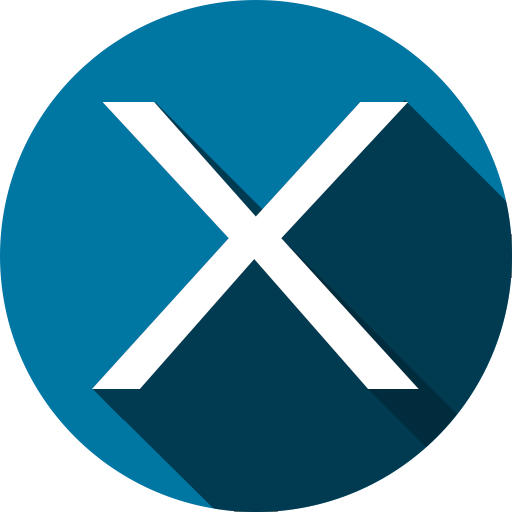
<style>
.page{position:relative;width:512px;height:512px;background:#0076a3}
.page>*{position:absolute;margin:0}
.t1{font:405.8px "Avenir-Book";color:#ffffff;scale:1.3 1}
</style>
<div class="page">
<p class="t1" style="left:92px;top:102px;width:327px;height:287px">X</p>
</div>
